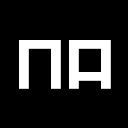
<style>
.page{position:relative;width:128px;height:128px;background:#000000}
.page>*{position:absolute;margin:0}
.t1{font:64px "Pixel-Art";color:#ffffff;font-weight:bold}
</style>
<div class="page">
<p class="t1" style="left:19px;top:40px;width:92px;height:49px">NA</p>
</div>
